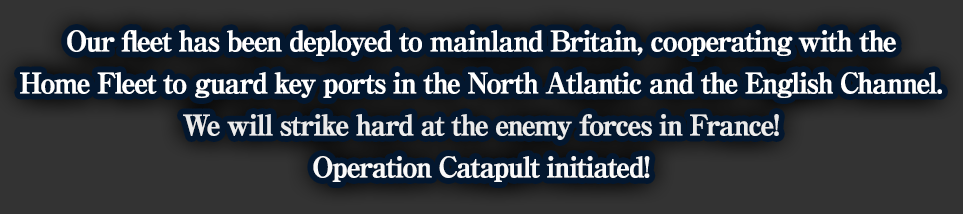
<style>
.page{position:relative;width:963px;height:214px;background:#333333}
.page>*{position:absolute;margin:0}
.t1{font:28px/42px "RyuminPro-ExBold";letter-spacing:-0.08em;color:#ffffff;font-weight:bold}
</style>
<div class="page">
<p class="t1" style="left:20px;top:30px;width:922px;height:152px;text-align:center">Our fleet has been deployed to mainland Britain, cooperating with the<br>Home Fleet to guard key ports in the North Atlantic and the English Channel.<br>We will strike hard at the enemy forces in France!<br>Operation Catapult initiated!</p>
</div>
